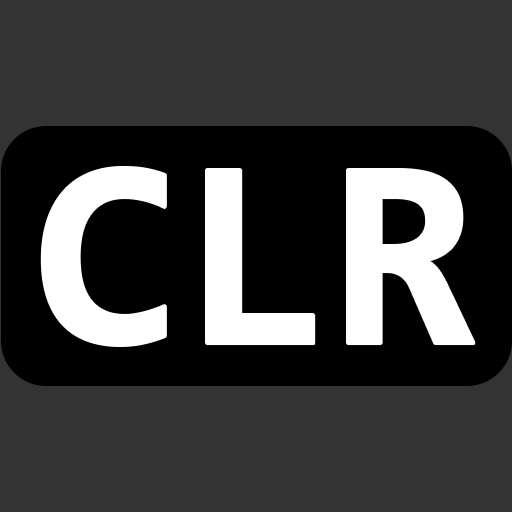
<style>
.page{position:relative;width:512px;height:512px;background:#333333}
.page>*{position:absolute;margin:0}
.t1{font:271px "Consolas-Bold";color:#ffffff}
</style>
<div class="page">
<p class="t1" style="left:42px;top:168px;width:432px;height:177px">CLR</p>
</div>
